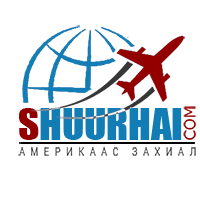
<style>
.page{position:relative;width:200px;height:201px;background:#ffffff}
.page>*{position:absolute;margin:0}
.t1{font:40.5px "MonImpact";color:#127db5}
.t2{font:40.5px "MonImpact";color:#930000}
.t3{font:15.2px "Verdana";color:#930000}
.t4{font:10.4px "RobotoCondensed-Light";letter-spacing:0.54em;color:#282828}
</style>
<div class="page">
<p class="t1" style="left:19px;top:108px;width:163px;height:32px"><span class="t2">S</span>HUURHAI</p>
<p class="t3" style="left:183px;top:106px;width:13px;height:34px;rotate:-90deg">COM</p>
<p class="t4" style="left:18px;top:147px;width:178px;height:9px">АМЕРИКААС ЗАХИАЛ</p>
</div>
